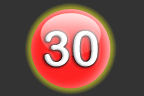
<style>
.page{position:relative;width:144px;height:96px;background:#333333}
.page>*{position:absolute;margin:0}
.t1{font:48.8px "ArialRoundedMTBold";color:#ffffff}
</style>
<div class="page">
<p class="t1" style="left:44px;top:30px;width:54px;height:37px">30</p>
</div>
